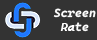
<style>
.page{position:relative;width:97px;height:40px;background:#333333}
.page>*{position:absolute;margin:0}
.t1{font:12px "CascadiaCodeItalic-BoldItalic";color:#ffffff}
</style>
<div class="page">
<p class="t1" style="left:53px;top:8px;width:43px;height:24px;text-align:center">Screen<br>Rate</p>
</div>
